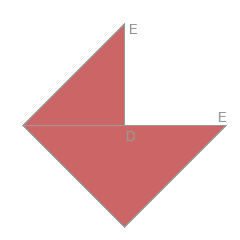
<style>
.page{position:relative;width:240px;height:240px;background:#ffffff}
.page>*{position:absolute;margin:0}
.t1{font:13.3px "ArialMT";color:#999999}
</style>
<div class="page">
<p class="t1" style="left:129px;top:24px;width:9px;height:10px">E</p>
<p class="t1" style="left:218px;top:112px;width:9px;height:10px">E</p>
<p class="t1" style="left:126px;top:131px;width:9px;height:10px">D</p>
</div>
